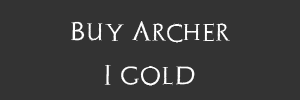
<style>
.page{position:relative;width:300px;height:100px;background:#333333}
.page>*{position:absolute;margin:0}
.t1{font:20.2px "Archeologicaps";color:#ffffff}
.t2{font:20.8px "Archeologicaps";color:#ffffff}
</style>
<div class="page">
<p class="t1" style="left:71px;top:21px;width:159px;height:22px">Buy Archer</p>
<p class="t2" style="left:104px;top:64px;width:91px;height:22px">I gold</p>
</div>
